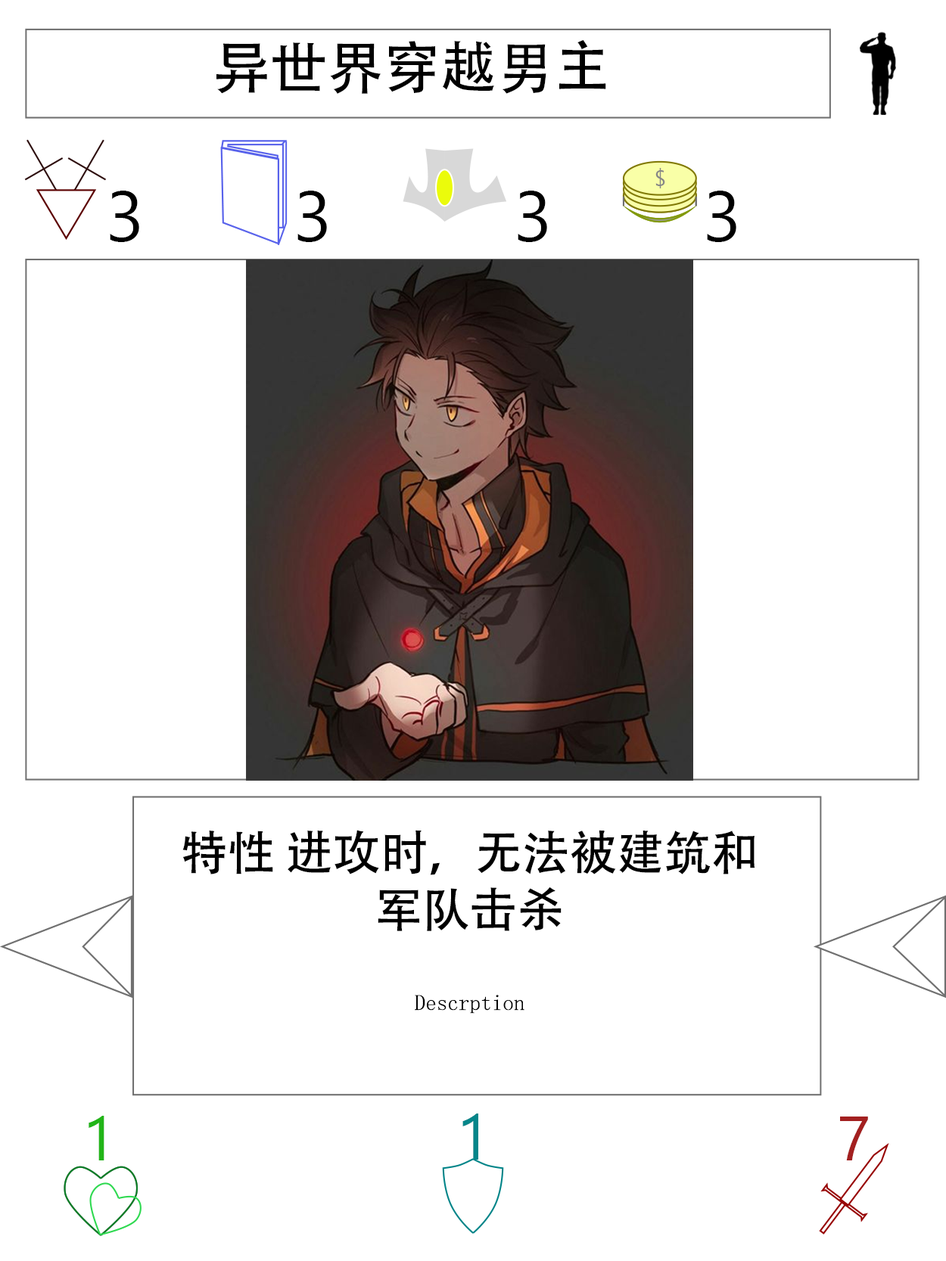
<style>
.page{position:relative;width:946px;height:1261px;background:#ffffff}
.page>*{position:absolute;margin:0}
.t1{font:56.7px "AdobeHeitiStd-Regular";color:#000000}
.t2{font:70.9px "SegoeUI";color:#000000}
.t3{font:47.3px "AdobeHeitiStd-Regular";color:#000000}
.t4{font:22.1px "NSimSun";color:#000000}
.t5{font:63px "SegoeUI";color:#22b518}
.t6{font:64.6px "SegoeUI";color:#05868a}
.t7{font:63px "SegoeUI";color:#a32020}
</style>
<div class="page">
<p class="t1" style="left:216px;top:40px;width:390px;height:54px">异世界穿越男主</p>
<p class="t2" style="left:110px;top:191px;width:29px;height:51px">3</p>
<p class="t2" style="left:297px;top:191px;width:30px;height:51px">3</p>
<p class="t2" style="left:517px;top:191px;width:30px;height:51px">3</p>
<p class="t2" style="left:707px;top:191px;width:29px;height:51px">3</p>
<p class="t3" style="left:182px;top:830px;width:572px;height:184px;text-align:center">特性 进攻时，无法被建筑和军队击杀<br><br><span class="t4">Descrption</span></p>
<p class="t5" style="left:89px;top:1116px;width:15px;height:44px">1</p>
<p class="t6" style="left:462px;top:1114px;width:16px;height:46px">1</p>
<p class="t7" style="left:840px;top:1117px;width:28px;height:43px">7</p>
</div>
